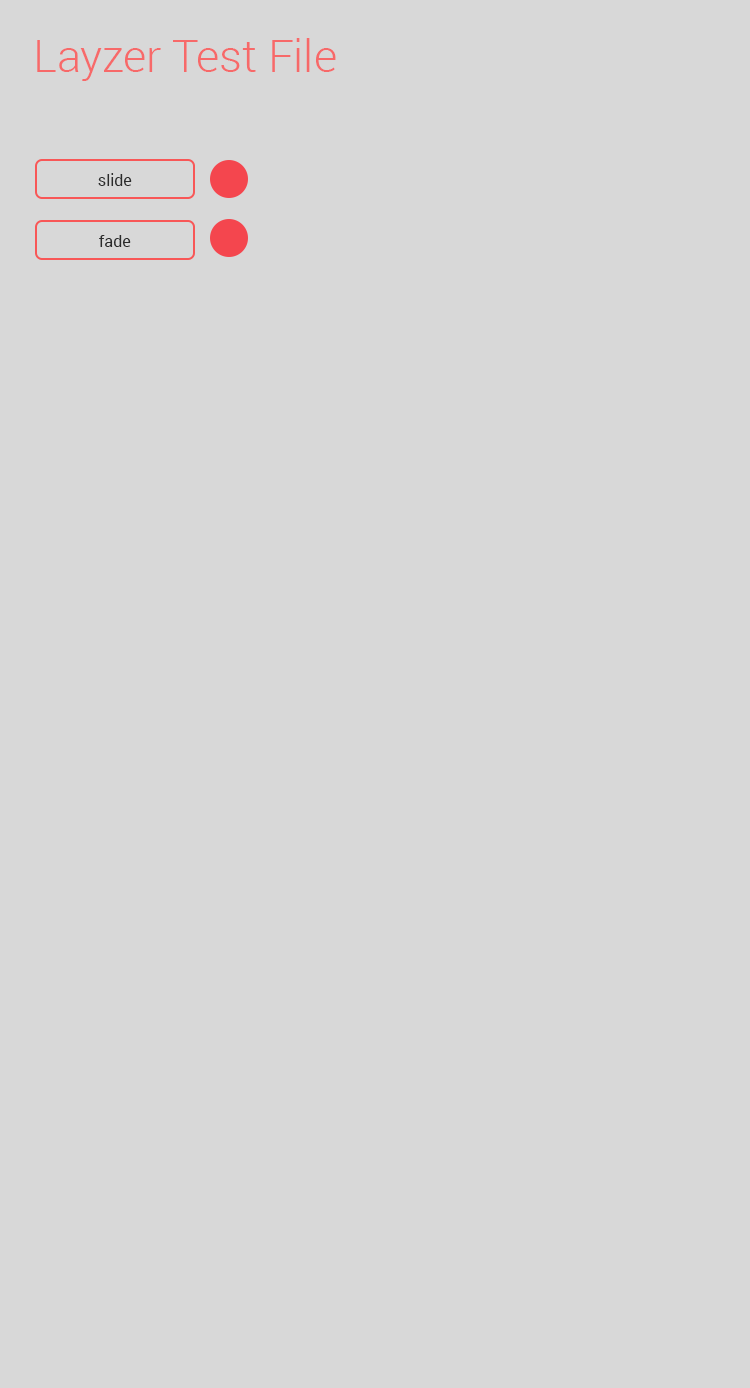
<style>
.page{position:relative;width:750px;height:1388px;background:#d8d8d8}
.page>*{position:absolute;margin:0}
.t1{font:44.2px "Roboto-Light";color:#f76969}
.t2{font:16px "Roboto-Regular";color:#2b2b2b}
</style>
<div class="page">
<p class="t1" style="left:37px;top:38px;width:299px;height:43px">Layzer Test File</p>
<p class="t2" style="left:98px;top:173px;width:34px;height:13px">slide</p>
<p class="t2" style="left:99px;top:235px;width:32px;height:12px">fade</p>
</div>
